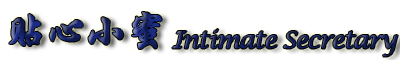
<style>
.page{position:relative;width:400px;height:60px;background:#ffffff}
.page>*{position:absolute;margin:0}
.t1{font:42px "STXingkai";letter-spacing:-0.075em;font-weight:bold}
.t2{font:24px "LucidaCalligraphy-Italic";letter-spacing:-0.075em;font-weight:bold}
</style>
<div class="page">
<p class="t1" style="left:9px;top:12px;width:153px;height:37px">贴心小蜜</p>
<p class="t2" style="left:172px;top:29px;width:226px;height:28px">Intimate Secretary</p>
</div>
